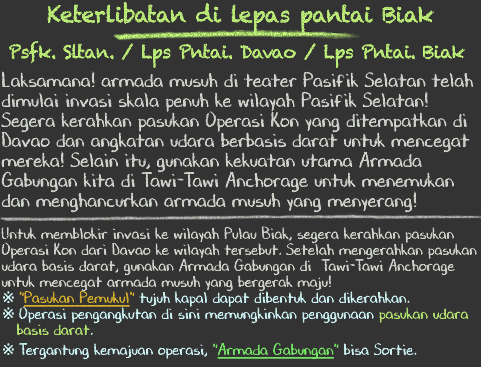
<style>
.page{position:relative;width:481px;height:367px;background:#333333}
.page>*{position:absolute;margin:0}
.t1{font:18px/36px "Chalkduster";letter-spacing:-0.04em;color:#b7e674}
.t2{font:22px/36px "Chalkduster";letter-spacing:-0.04em;color:#b7e674}
.t3{font:20px/20px "DJBChalkItUp";color:#d9ded6}
.t4{font:16px/16px "DJBChalkItUp";color:#d9ded6}
.t5{font:16px/16px "TimesNewRomanPSMT";color:#d7feff}
.t6{font:16px/16px "DJBChalkItUp";color:#dfb731}
.t7{font:16px/16px "DJBChalkItUp";color:#dfb731;text-decoration:underline}
.t8{font:16px/16px "DJBChalkItUp";color:#d7feff}
.t9{font:16px/16px "DJBChalkItUp";color:#bdef78}
.t10{font:16px/20px "DJBChalkItUp";color:#d7feff}
.t11{font:16px/16px "DJBChalkItUp";color:#7bf26b}
.t12{font:16px/16px "DJBChalkItUp";color:#7bf26b;text-decoration:underline}
</style>
<div class="page">
<p class="t1" style="left:9px;top:1px;width:457px;height:67px;text-align:center"><span class="t2">Keterlibatan di lepas pantai Biak<br></span>Psfk. Sltan. / Lps Pntai. Davao / Lps Pntai. Biak</p>
<p class="t3" style="left:1px;top:71px;width:476px;height:289px">Laksamana! armada musuh di teater Pasifik Selatan telah<br>dimulai invasi skala penuh ke wilayah Pasifik Selatan!<br>Segera kerahkan pasukan Operasi Kon yang ditempatkan di<br>Davao dan angkatan udara berbasis darat untuk mencegat<br>mereka! Selain itu, gunakan kekuatan utama Armada <br>Gabungan kita di Tawi-Tawi Anchorage untuk menemukan<br>dan menghancurkan armada musuh yang menyerang! <br><br><span class="t4">Untuk memblokir invasi ke wilayah Pulau Biak, segera kerahkan pasukan<br>Operasi Kon dari Davao ke wilayah tersebut. Setelah mengerahkan pasukan<br>udara basis darat, gunakan Armada Gabungan di  Tawi-Tawi Anchorage<br>untuk mencegat armada musuh yang bergerak maju!<br></span><span class="t5">※ </span><span class="t6">"</span><span class="t7">Pasukan Pemukul</span><span class="t6">" </span><span class="t8">tujuh kapal dapat dibentuk dan dikerahkan.<br></span><span class="t5">※ </span><span class="t8">Operasi pengangkutan di sini memungkinkan penggunaan </span><span class="t9">pasukan udara<br>   basis darat</span><span class="t8">.<br></span><span class="t5">※ </span><span class="t10">Tergantung kemajuan operasi, </span><span class="t11">"</span><span class="t12">Armada Gabungan</span><span class="t11">" </span><span class="t10">bisa Sortie.</span></p>
</div>
